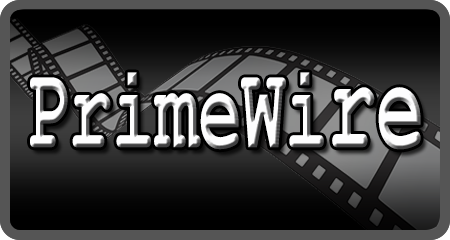
<style>
.page{position:relative;width:450px;height:240px}
.page>*{position:absolute;margin:0}
.t1{font:117.6px "CourierNewPS-BoldMT";color:#fdfdfe;scale:0.61 1}
.t2{font:78.4px "CourierNewPS-BoldMT";color:#fdfdfe;scale:0.61 1}
.t3{font:130.6px "CourierNewPS-BoldMT";color:#fdfdfe;scale:0.61 1}
</style>
<div class="page">
<p class="t1" style="left:30px;top:72px;width:391px;height:78px"><span class="t2"><br> </span>PrimeWi<span class="t3">re</span></p>
</div>
